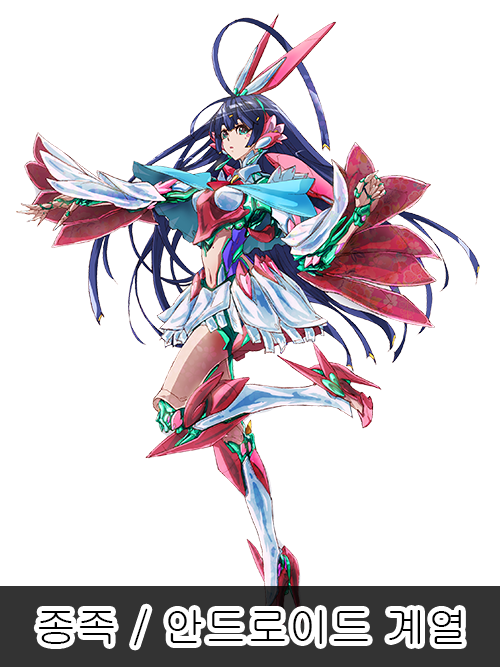
<style>
.page{position:relative;width:500px;height:667px;background:#ffffff}
.page>*{position:absolute;margin:0}
.t1{font:12px "Gulim";color:#000000}
</style>
<div class="page">
<p class="t1" style="left:38px;top:608px;width:424px;height:38px">종족 / 안드로이드 계열</p>
</div>
